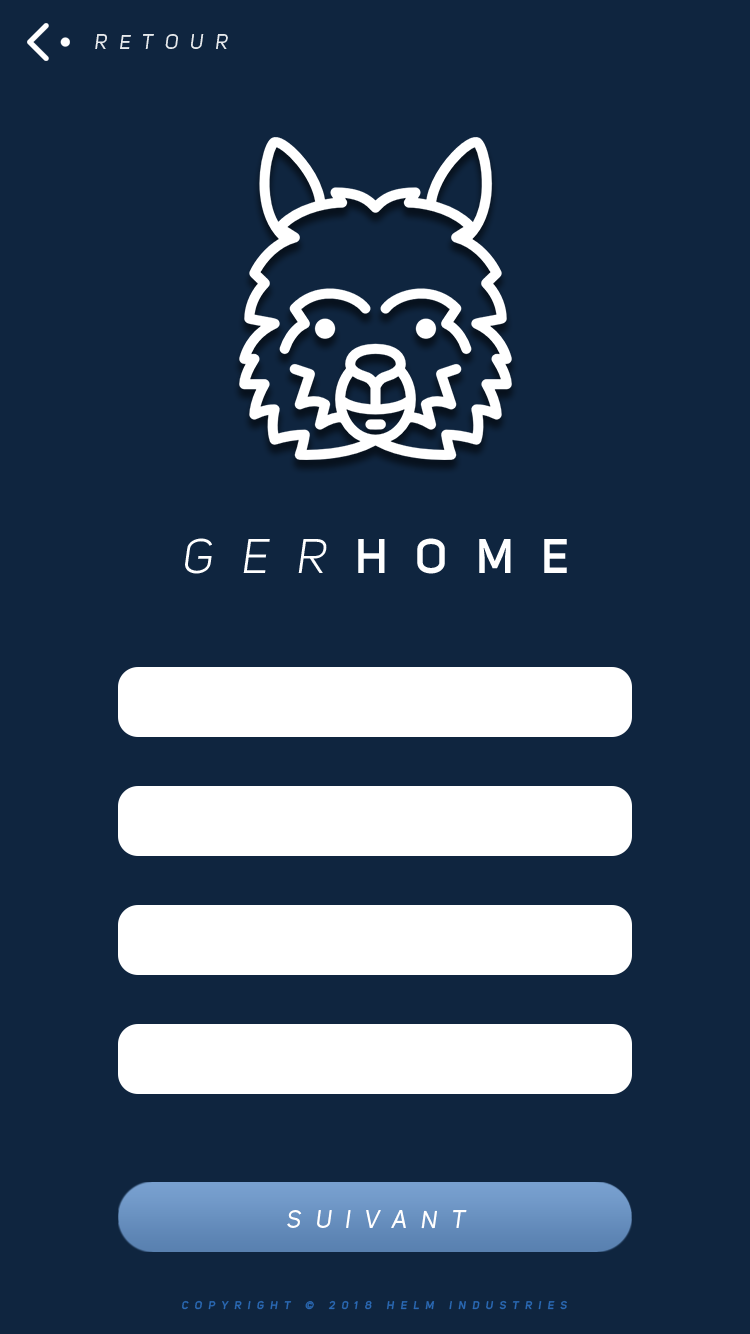
<style>
.page{position:relative;width:750px;height:1334px;background:#0f253f}
.page>*{position:absolute;margin:0}
.t1{font:48px "UniSansSemiBold";letter-spacing:0.585em;color:#ffffff;text-transform:uppercase}
.t2{font:48px "UniSansBookItalic";letter-spacing:0.585em;color:#ffffff;text-transform:uppercase}
.t3{font:24px "UniSansRegularItalic";letter-spacing:0.585em;color:#ffffff;text-transform:uppercase}
.t4{font:11px "UniSansSemiBoldItalic";letter-spacing:0.585em;color:#2a69b4;text-transform:uppercase}
</style>
<div class="page">
<p class="t1" style="left:185px;top:538px;width:382px;height:36px"><span class="t2">Ger</span>home</p>
<p class="t3" style="left:287px;top:1210px;width:180px;height:19px">SUIVANT</p>
<p class="t4" style="left:182px;top:1300px;width:385px;height:10px">Copyright © 2018 helm industries</p>
</div>
